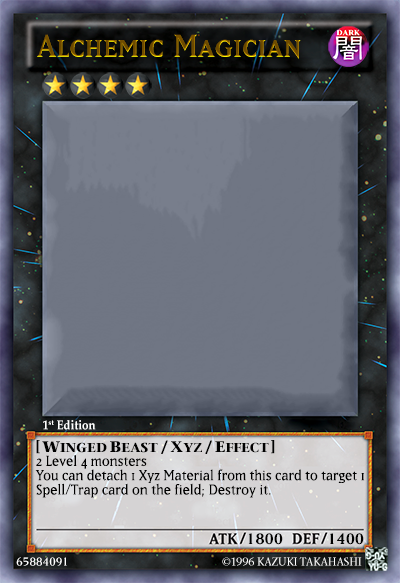
<style>
.page{position:relative;width:400px;height:583px}
.page>*{position:absolute;margin:0}
.t1{font:37.4px "MatrixRegularSmallCaps";letter-spacing:0.01em;color:#704c00}
.t2{font:12.8px "PalatinoLinotype-Bold";color:#ffffff;scale:0.9 1}
.t3{font:12.9px "StoneSerifLT-Bold";color:#010101;text-transform:uppercase}
.t4{font:18.4px "MatrixBold";letter-spacing:0.01em;color:#010101;scale:1.09 1}
.t5{font:15.3px "StoneSerifLT-Bold";color:#010101;font-variant:small-caps}
.t6{font:15.8px "StoneSerifSemSCITCTTSemi";color:#010101;font-weight:bold}
.t7{font:16.8px/14.3px "Matrix-Book";color:#000000}
.t8{font:17.9px "MatrixBoldFractions";color:#010101}
.t9{font:13.3px "MatrixRegularSmallCaps";letter-spacing:0.01em;color:#ffffff;scale:1.04 1}
.t10{font:11.2px "StoneSerifITC-Medium";letter-spacing:-0.005em;color:#ffffff}
</style>
<div class="page">
<p class="t1" style="left:37px;top:34px;width:264px;height:25px">Alchemic Magician</p>
<p class="t2" style="left:43px;top:420px;width:53px;height:10px">1st Edition</p>
<p class="t3" style="left:36px;top:440px;width:239px;height:14px"><span class="t4">[ </span><span class="t5">W</span>inged <span class="t5">B</span>east <span class="t6">/ </span><span class="t5">X</span>yz <span class="t6">/ </span><span class="t5">E</span>ffect <span class="t4">]</span></p>
<p class="t7" style="left:35px;top:455px;width:330px;height:43px;text-align:justify">2 Level 4 monsters<br>You can detach 1 Xyz Material from this card to target 1 Spell/Trap card on the field; Destroy it.</p>
<p class="t8" style="left:248px;top:533px;width:35px;height:12px">1800</p>
<p class="t8" style="left:330px;top:533px;width:34px;height:12px">1400</p>
<p class="t9" style="left:16px;top:557px;width:51px;height:9px">65884091</p>
<p class="t10" style="left:222px;top:557px;width:140px;height:9px">©1996 KAZUKI TAKAHASHI</p>
</div>
